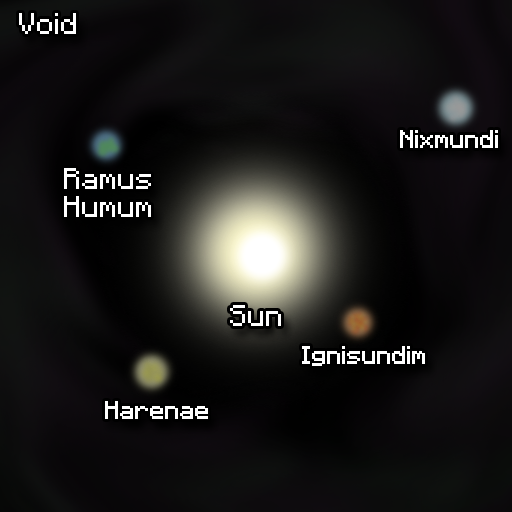
<style>
.page{position:relative;width:512px;height:512px}
.page>*{position:absolute;margin:0}
.t1{font:24px "Minecraftia-Regular";color:#ffffff}
.t2{font:20px "Minecraftia-Regular";color:#ffffff}
</style>
<div class="page">
<p class="t1" style="left:19px;top:13px;width:57px;height:21px">Void</p>
<p class="t2" style="left:400px;top:130px;width:98px;height:18px">Nixmundi</p>
<p class="t1" style="left:64px;top:168px;width:87px;height:49px;text-align:center">Ramus<br>Humum</p>
<p class="t1" style="left:230px;top:305px;width:51px;height:21px">Sun</p>
<p class="t2" style="left:302px;top:346px;width:123px;height:20px">Ignisundim</p>
<p class="t2" style="left:105px;top:401px;width:103px;height:18px">Harenae</p>
</div>
